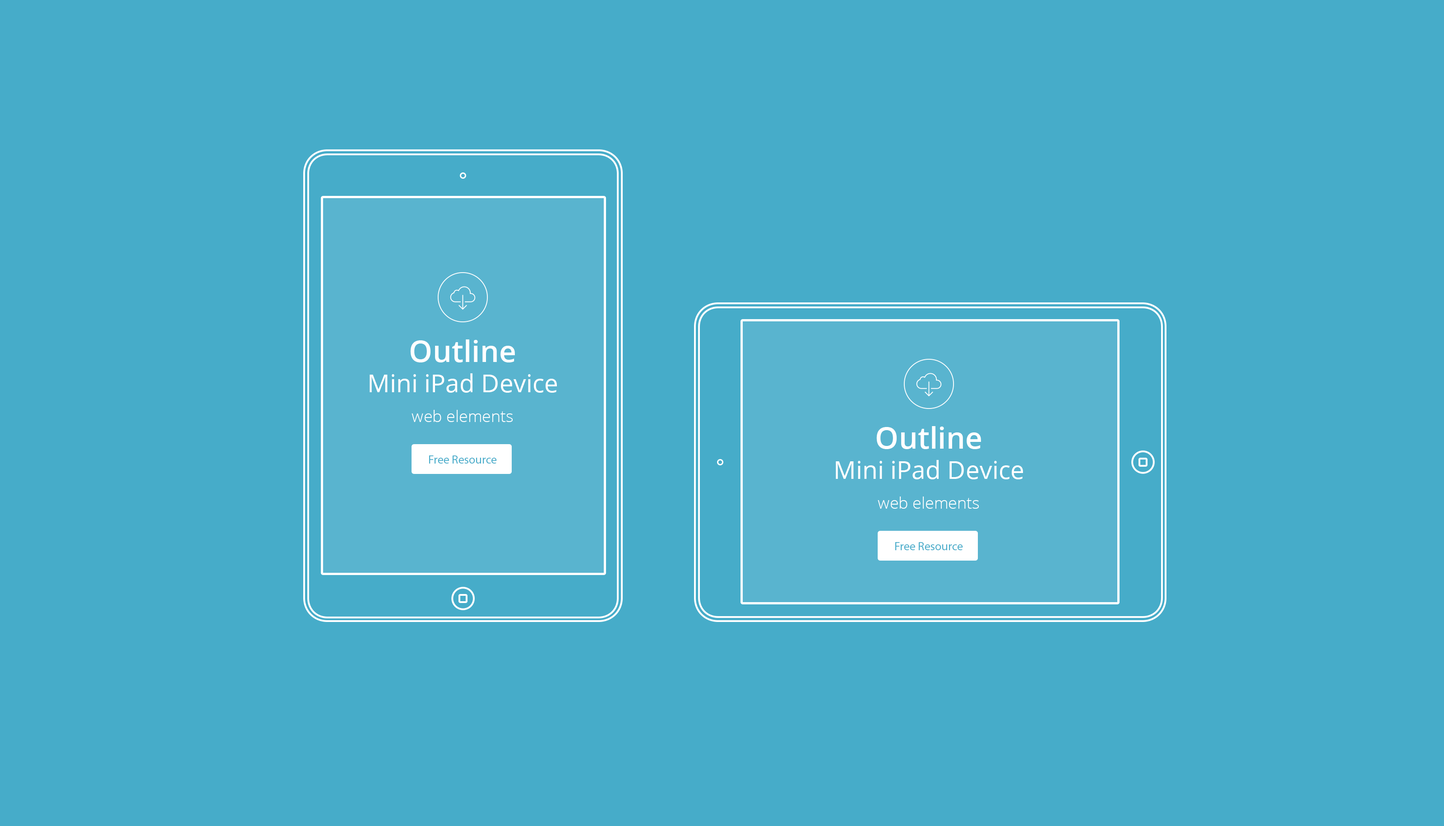
<style>
.page{position:relative;width:1444px;height:826px;background:#46acc9}
.page>*{position:absolute;margin:0}
.t1{font:25px/30px "OpenSans";color:#ffffff}
.t2{font:30px "OpenSans-Semibold";color:#ffffff}
.t3{font:16.2px/30px "OpenSans-Light";color:#ffffff}
.t4{font:11.9px "MyriadPro-Regular";color:#47acca}
</style>
<div class="page">
<p class="t1" style="left:370px;top:339px;width:187px;height:83px;text-align:center"><span class="t2">Outline <br></span>Mini iPad Device<br><span class="t3">web elements</span></p>
<p class="t1" style="left:836px;top:426px;width:187px;height:83px;text-align:center"><span class="t2">Outline <br></span>Mini iPad Device<br><span class="t3">web elements</span></p>
<p class="t4" style="left:429px;top:455px;width:68px;height:8px">Free Resource</p>
<p class="t4" style="left:895px;top:542px;width:68px;height:8px">Free Resource</p>
</div>
